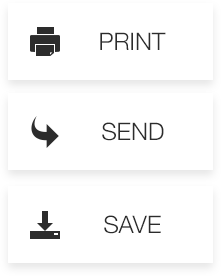
<style>
.page{position:relative;width:221px;height:279px;background:#ffffff}
.page>*{position:absolute;margin:0}
.t1{font:24px "HelveticaNeue-Light";color:#2c2c2c;text-transform:uppercase}
</style>
<div class="page">
<p class="t1" style="left:100px;top:32px;width:66px;height:18px">PRINT</p>
<p class="t1" style="left:102px;top:122px;width:62px;height:19px">SEND</p>
<p class="t1" style="left:104px;top:215px;width:57px;height:19px">SAVE</p>
</div>
